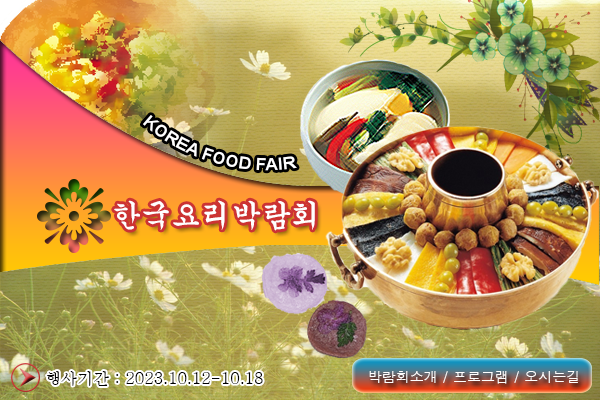
<style>
.page{position:relative;width:600px;height:400px}
.page>*{position:absolute;margin:0}
.t1{font:16px "Arial-BoldMT";color:#ffffff}
.t2{font:30px "Gungsuh";color:#ffffff}
.t3{font:16px "Batang";color:#000000}
.t4{font:14px "Dotum";color:#ffffff}
</style>
<div class="page">
<p class="t1" style="left:142px;top:115px;width:155px;height:56px;rotate:16deg">KOREA FOOD FAIR</p>
<p class="t2" style="left:114px;top:200px;width:201px;height:31px">한국요리박람회</p>
<p class="t3" style="left:47px;top:371px;width:216px;height:15px">행사기간 : 2023.10.12-10.18</p>
<p class="t4" style="left:369px;top:371px;width:209px;height:13px">박람회소개 / 프로그램 / 오시는길</p>
</div>
